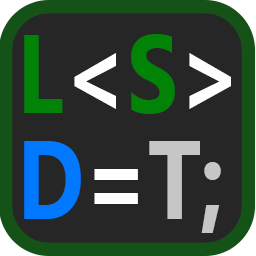
<style>
.page{position:relative;width:256px;height:256px;background:#262626}
.page>*{position:absolute;margin:0}
.t1{font:112px/105.9px "SegoeUI-Bold";color:#c6c6c6;scale:0.81 1}
.t2{font:112px/105.9px "SegoeUI-Bold";color:#008306;scale:0.81 1}
.t3{font:112px/105.9px "SegoeUI-Bold";color:#ffffff;scale:0.81 1}
.t4{font:112px/105.9px "SegoeUI-Bold";color:#0078ff;scale:0.81 1}
</style>
<div class="page">
<p class="t1" style="left:24px;top:34px;width:207px;height:199px"><span class="t2">L</span><span class="t3">&lt;</span><span class="t2">S</span><span class="t3">&gt;<br></span><span class="t4">D</span><span class="t3">=</span>T;</p>
</div>
